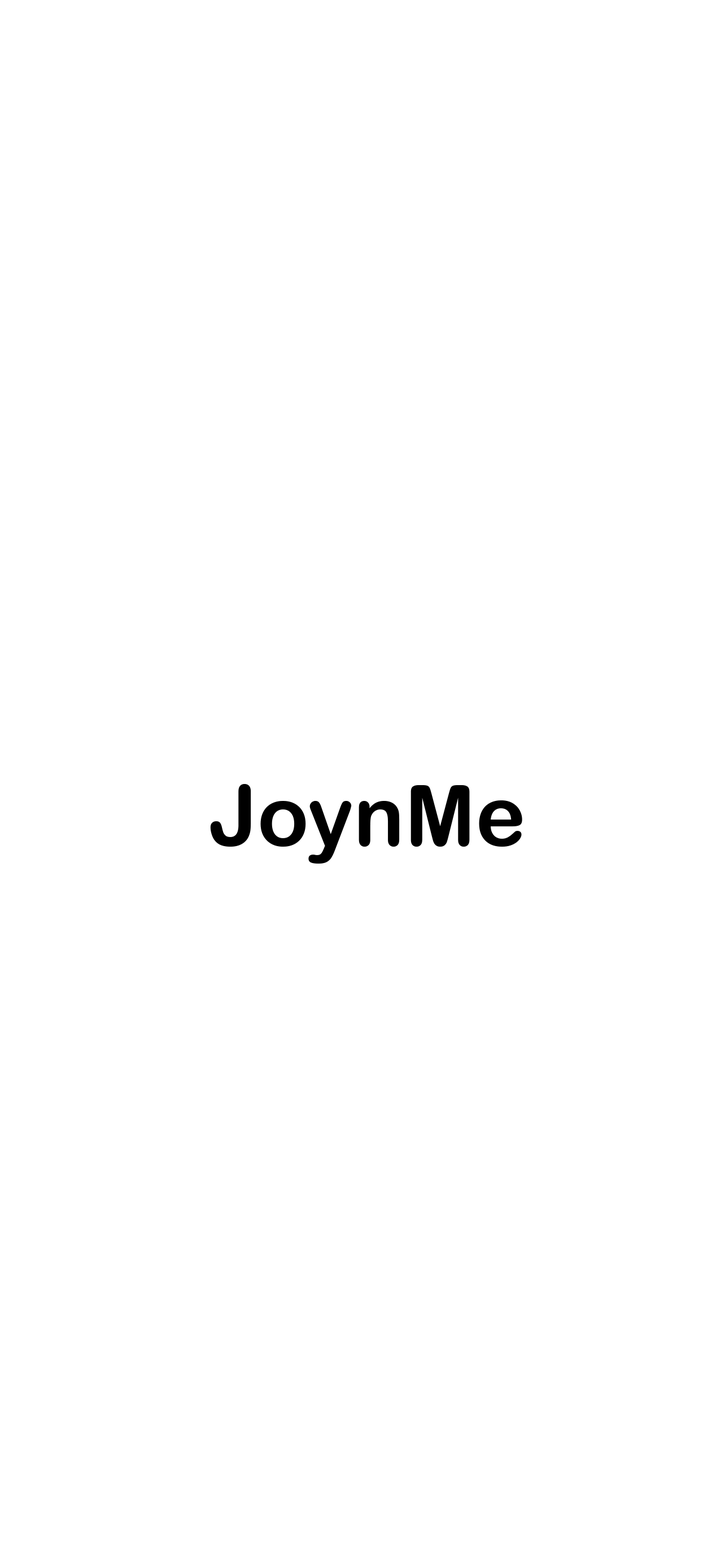
<style>
.page{position:relative;width:725px;height:1568px;background:#ffffff}
.page>*{position:absolute;margin:0}
.t1{font:84.7px "ArialRoundedMTBold";color:#000000}
</style>
<div class="page">
<p class="t1" style="left:210px;top:784px;width:312px;height:80px">JoynMe</p>
</div>
